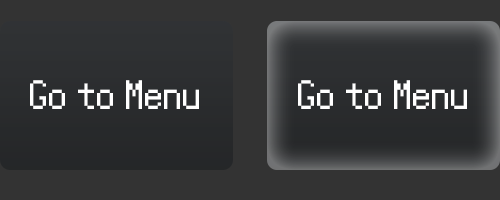
<style>
.page{position:relative;width:500px;height:200px;background:#333333}
.page>*{position:absolute;margin:0}
.t1{font:41.7px "Power-Green";color:#ffffff}
</style>
<div class="page">
<p class="t1" style="left:30px;top:80px;width:169px;height:29px">Go to Menu</p>
<p class="t1" style="left:298px;top:80px;width:169px;height:29px">Go to Menu</p>
</div>
